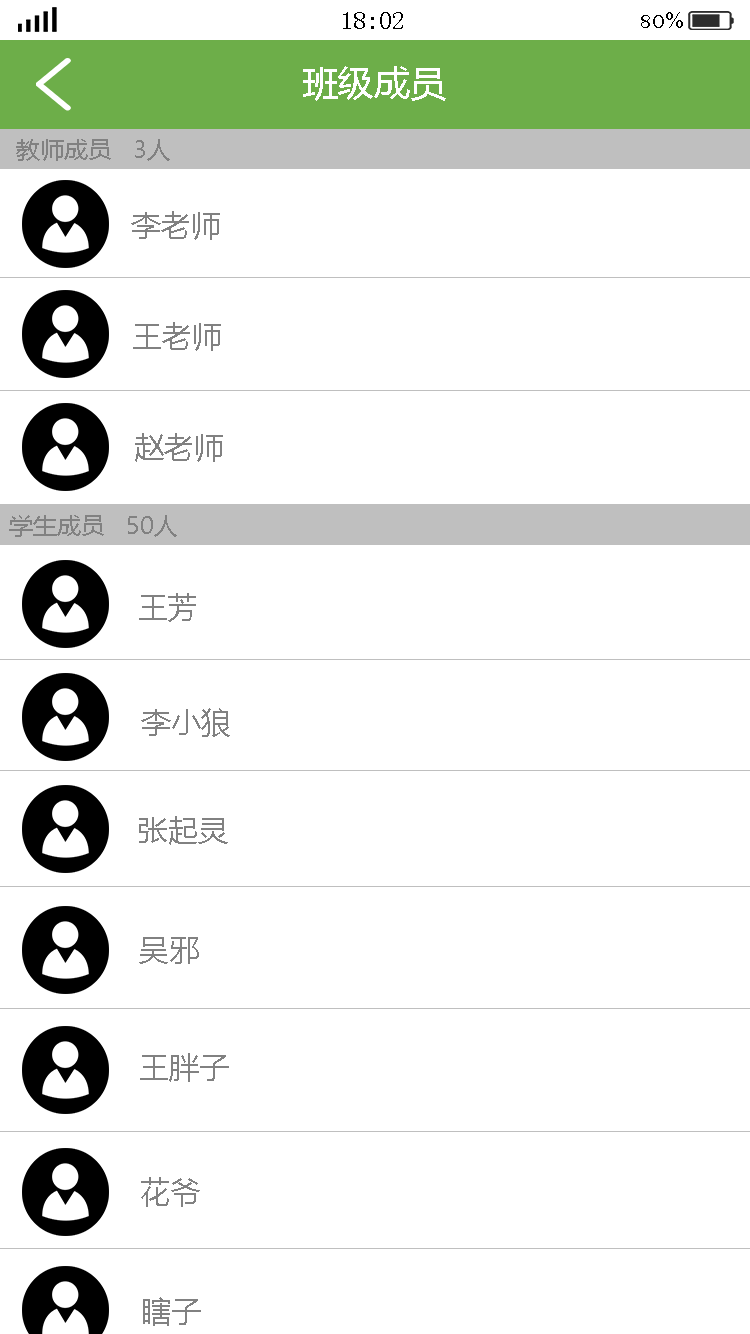
<style>
.page{position:relative;width:750px;height:1334px;background:#ffffff}
.page>*{position:absolute;margin:0}
.t1{font:25px "SimSun";color:#000000}
.t2{font:25px "BellMT";color:#000000}
.t3{font:36px "MicrosoftYaHei";color:#ffffff}
.t4{font:24px "MicrosoftYaHei";color:#818181}
.t5{font:30px "MicrosoftYaHei";color:#818181}
</style>
<div class="page">
<p class="t1" style="left:343px;top:12px;width:60px;height:17px">18:02</p>
<p class="t2" style="left:641px;top:12px;width:42px;height:16px">80%</p>
<p class="t3" style="left:303px;top:66px;width:143px;height:35px">班级成员</p>
<p class="t4" style="left:16px;top:139px;width:154px;height:22px">教师成员   3人</p>
<p class="t5" style="left:131px;top:211px;width:89px;height:29px">李老师</p>
<p class="t5" style="left:133px;top:322px;width:88px;height:29px">王老师</p>
<p class="t5" style="left:135px;top:433px;width:88px;height:29px">赵老师</p>
<p class="t4" style="left:9px;top:515px;width:168px;height:22px">学生成员   50人</p>
<p class="t5" style="left:139px;top:593px;width:57px;height:29px">王芳</p>
<p class="t5" style="left:141px;top:708px;width:89px;height:29px">李小狼</p>
<p class="t5" style="left:139px;top:816px;width:89px;height:29px">张起灵</p>
<p class="t5" style="left:139px;top:937px;width:60px;height:27px">吴邪</p>
<p class="t5" style="left:140px;top:1053px;width:89px;height:29px">王胖子</p>
<p class="t5" style="left:141px;top:1177px;width:59px;height:30px">花爷</p>
<p class="t5" style="left:143px;top:1297px;width:58px;height:29px">瞎子</p>
</div>
